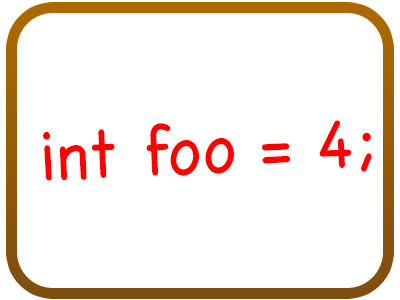
<style>
.page{position:relative;width:400px;height:300px;background:#ffffff}
.page>*{position:absolute;margin:0}
.t1{font:68.8px "Chalkboard";color:#ff0000;scale:0.95 1}
</style>
<div class="page">
<p class="t1" style="left:43px;top:120px;width:329px;height:61px;rotate:-3deg">int foo = 4;</p>
</div>
